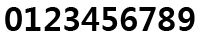
<style>
.page{position:relative;width:200px;height:40px;background:#ffffff}
.page>*{position:absolute;margin:0}
.t1{font:33px "MalgunGothicBold";color:#000000}
</style>
<div class="page">
<p class="t1" style="left:5px;top:7px;width:190px;height:24px">0123456789</p>
</div>
